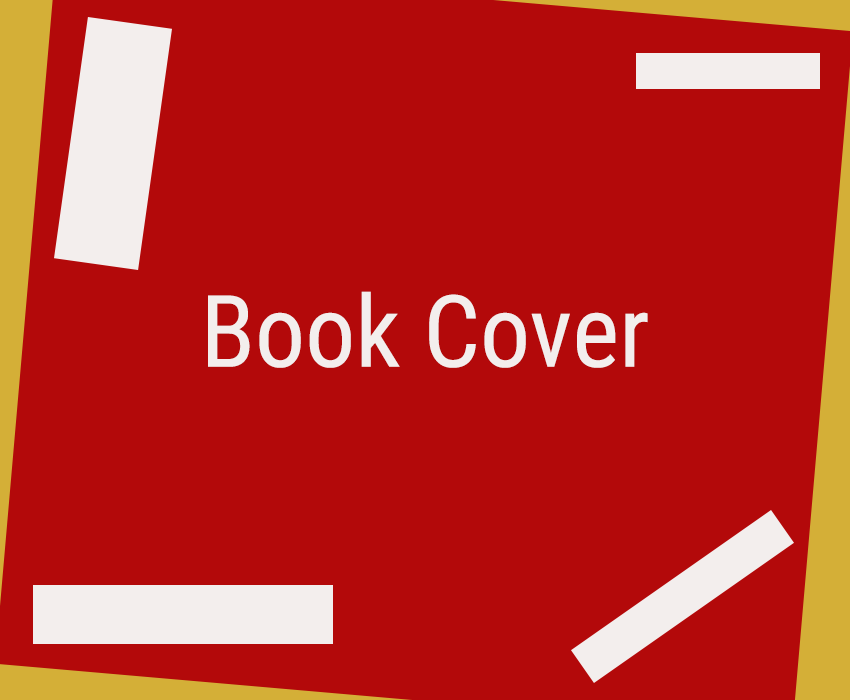
<style>
.page{position:relative;width:850px;height:700px;background:#b3090a}
.page>*{position:absolute;margin:0}
.t1{font:100px "RobotoCondensed-Regular";color:#f3eeed}
</style>
<div class="page">
<p class="t1" style="left:208px;top:291px;width:440px;height:77px">Book Cover</p>
</div>
